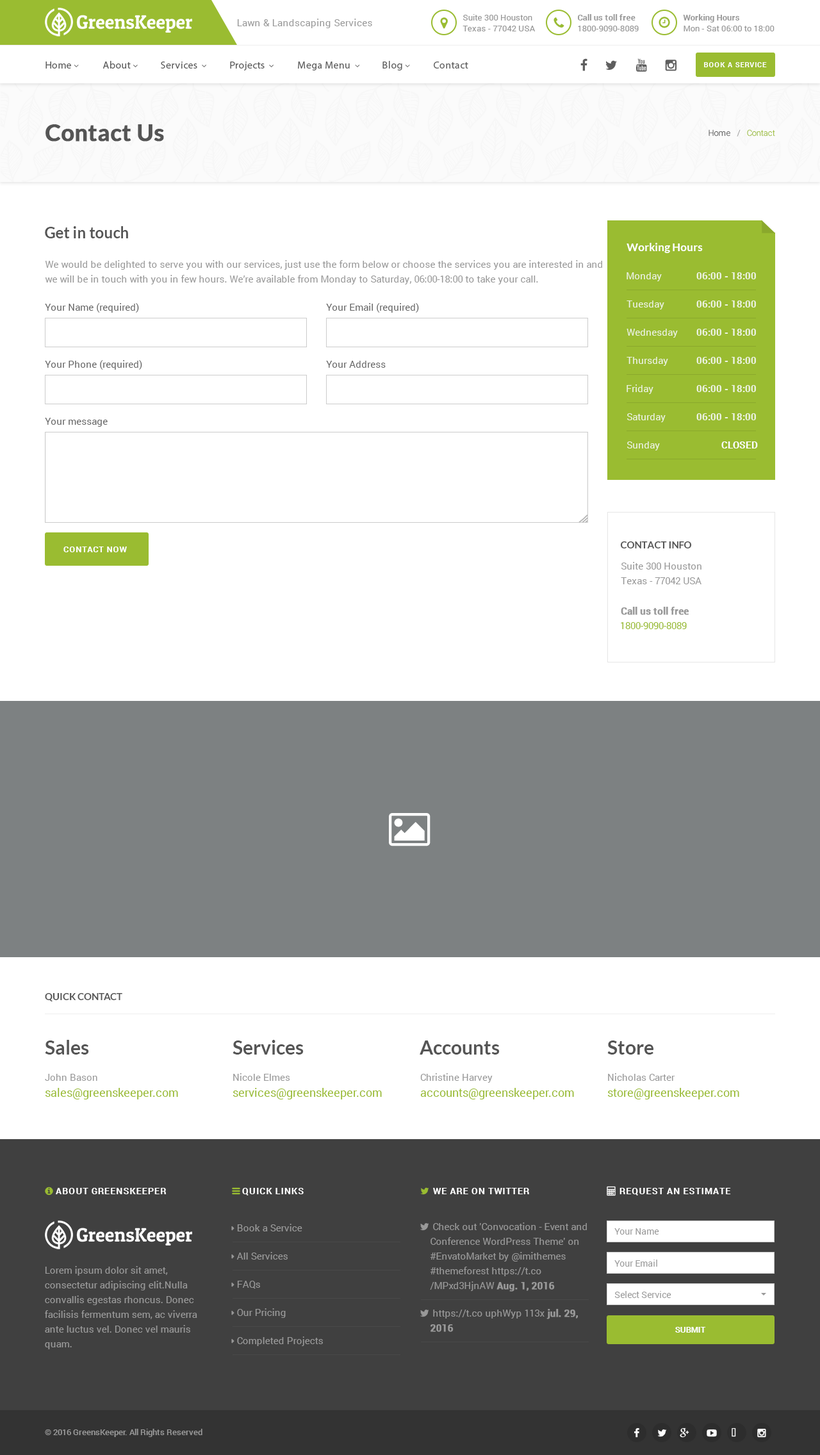
<style>
.page{position:relative;width:820px;height:1455px;background:#ffffff}
.page>*{position:absolute;margin:0}
.t1{font:8.3px/10.9px "Roboto-Regular";letter-spacing:0.02em;color:#999999}
.t2{font:8.3px/10.9px "Roboto-Bold";letter-spacing:0.02em;color:#999999}
.t3{font:9.6px "Roboto-Regular";letter-spacing:0.02em;color:#999999}
.t4{font:10.2px "MyriadPro-Regular";letter-spacing:0.02em;color:#5e5e5e}
.t5{font:7px "Roboto-Bold";letter-spacing:0.08em;color:#ffffff;text-transform:uppercase}
.t6{font:23.1px "Lato-Bold";color:#555555;font-weight:bold}
.t7{font:8.3px "Roboto-Light";color:#555555}
.t8{font:8.3px "Roboto-Light";color:#999999}
.t9{font:8.3px "Roboto-Light";color:#9abc31}
.t10{font:15.4px "Lato-Bold";color:#555555}
.t11{font:10.9px "Lato-Bold";color:#ffffff}
.t12{font:9.6px/14.7px "Roboto-Regular";color:#999999}
.t13{font:9.6px "Roboto-Regular";color:#edf3e0}
.t14{font:9.6px "Roboto-Bold";color:#edf3e0}
.t15{font:9.6px "Roboto-Regular";color:#666666}
.t16{font:9.6px "Roboto-Bold";color:#ffffff}
.t17{font:9.6px "Lato-Bold";color:#555555;text-transform:uppercase}
.t18{font:8.3px "Roboto-Bold";letter-spacing:0.08em;color:#ffffff;text-transform:uppercase}
.t19{font:9.6px "Roboto-Bold";color:#999999;font-weight:bold}
.t20{font:9.6px "Roboto-Regular";color:#9abc31}
.t21{font:19.2px "Lato-Bold";color:#555555}
.t22{font:9.6px "Roboto-Regular";color:#999999}
.t23{font:11.5px "Roboto-Regular";color:#9abc31}
.t24{font:9px "Roboto-Bold";letter-spacing:0.08em;color:#ffffff;text-transform:uppercase}
.t25{font:9.6px/14.7px "Roboto-Bold";color:#999999;font-weight:bold}
.t26{font:9px "Roboto-Regular";color:#999999}
.t27{font:8.3px "Roboto-Bold";color:#ffffff;text-transform:uppercase}
.t28{font:8.3px "Roboto-Medium";color:#999999}
</style>
<div class="page">
<p class="t1" style="left:462px;top:14px;width:73px;height:17px">Suite 300 Houston<br>Texas - 77042 USA</p>
<p class="t2" style="left:578px;top:14px;width:61px;height:17px">Call us toll free<br><span class="t1">1800-9090-8089</span></p>
<p class="t1" style="left:683px;top:14px;width:91px;height:17px"><span class="t2">Working Hours<br></span>Mon - Sat 06:00 to 18:00</p>
<p class="t3" style="left:237px;top:19px;width:135px;height:9px">Lawn &amp; Landscaping Services</p>
<p class="t4" style="left:434px;top:61px;width:34px;height:8px">Contact</p>
<p class="t5" style="left:704px;top:62px;width:63px;height:5px">Book a service</p>
<p class="t6" style="left:45px;top:124px;width:119px;height:18px">Contact Us</p>
<p class="t7" style="left:708px;top:129px;width:22px;height:7px">Home</p>
<p class="t8" style="left:737px;top:129px;width:3px;height:7px">/</p>
<p class="t9" style="left:747px;top:129px;width:28px;height:7px">Contact</p>
<p class="t10" style="left:45px;top:226px;width:83px;height:12px">Get in touch</p>
<p class="t11" style="left:626px;top:243px;width:77px;height:10px">Working Hours</p>
<p class="t12" style="left:45px;top:260px;width:557px;height:24px">We would be delighted to serve you with our services, just use the form below or choose the services you are interested in and <br>we will be in touch with you in few hours. We’re available from Monday to Saturday, 06:00-18:00 to take your call.</p>
<p class="t13" style="left:626px;top:272px;width:36px;height:9px">Monday</p>
<p class="t14" style="left:696px;top:272px;width:60px;height:7px">06:00 - 18:00</p>
<p class="t15" style="left:45px;top:303px;width:94px;height:10px">Your Name (required)</p>
<p class="t15" style="left:326px;top:303px;width:93px;height:10px">Your Email (required)</p>
<p class="t13" style="left:626px;top:300px;width:38px;height:9px">Tuesday</p>
<p class="t14" style="left:696px;top:300px;width:60px;height:7px">06:00 - 18:00</p>
<p class="t13" style="left:626px;top:329px;width:52px;height:9px">Wednesday</p>
<p class="t14" style="left:696px;top:329px;width:60px;height:7px">06:00 - 18:00</p>
<p class="t15" style="left:45px;top:360px;width:97px;height:10px">Your Phone (required)</p>
<p class="t15" style="left:326px;top:361px;width:60px;height:7px">Your Address</p>
<p class="t13" style="left:626px;top:357px;width:42px;height:9px">Thursday</p>
<p class="t14" style="left:696px;top:357px;width:60px;height:7px">06:00 - 18:00</p>
<p class="t13" style="left:626px;top:384px;width:27px;height:10px">Friday</p>
<p class="t14" style="left:696px;top:385px;width:60px;height:7px">06:00 - 18:00</p>
<p class="t13" style="left:627px;top:413px;width:38px;height:9px">Saturday</p>
<p class="t14" style="left:696px;top:413px;width:60px;height:7px">06:00 - 18:00</p>
<p class="t15" style="left:45px;top:418px;width:63px;height:9px">Your message</p>
<p class="t13" style="left:627px;top:441px;width:33px;height:9px">Sunday</p>
<p class="t16" style="left:721px;top:441px;width:37px;height:7px">CLOSED</p>
<p class="t17" style="left:620px;top:541px;width:72px;height:7px">Contact Info</p>
<p class="t18" style="left:63px;top:546px;width:64px;height:6px">Contact now</p>
<p class="t12" style="left:621px;top:562px;width:80px;height:22px">Suite 300 Houston<br>Texas - 77042 USA</p>
<p class="t19" style="left:621px;top:607px;width:68px;height:8px">Call us toll free</p>
<p class="t20" style="left:621px;top:622px;width:66px;height:7px">1800-9090-8089</p>
<p class="t17" style="left:45px;top:993px;width:77px;height:8px">Quick Contact</p>
<p class="t21" style="left:45px;top:1039px;width:44px;height:15px">Sales</p>
<p class="t21" style="left:232px;top:1039px;width:72px;height:15px">Services</p>
<p class="t21" style="left:420px;top:1040px;width:80px;height:14px">Accounts</p>
<p class="t21" style="left:607px;top:1040px;width:46px;height:14px">Store</p>
<p class="t22" style="left:45px;top:1073px;width:52px;height:7px">John Bason</p>
<p class="t22" style="left:233px;top:1073px;width:57px;height:7px">Nicole Elmes</p>
<p class="t22" style="left:420px;top:1073px;width:73px;height:9px">Christine Harvey</p>
<p class="t22" style="left:608px;top:1073px;width:66px;height:7px">Nicholas Carter</p>
<p class="t23" style="left:45px;top:1088px;width:133px;height:11px">sales@greenskeeper.com</p>
<p class="t23" style="left:232px;top:1088px;width:150px;height:11px">services@greenskeeper.com</p>
<p class="t23" style="left:420px;top:1088px;width:154px;height:11px">accounts@greenskeeper.com</p>
<p class="t23" style="left:607px;top:1088px;width:132px;height:11px">store@greenskeeper.com</p>
<p class="t24" style="left:56px;top:1187px;width:111px;height:7px">About GreensKeeper</p>
<p class="t24" style="left:242px;top:1187px;width:62px;height:8px">Quick Links</p>
<p class="t24" style="left:433px;top:1187px;width:96px;height:7px">We are on Twitter</p>
<p class="t24" style="left:619px;top:1187px;width:112px;height:8px">Request an Estimate</p>
<p class="t22" style="left:237px;top:1223px;width:65px;height:8px">Book a Service</p>
<p class="t12" style="left:430px;top:1222px;width:157px;height:69px">Check out 'Convocation - Event and <br>Conference WordPress Theme' on<br>#EnvatoMarket by @imithemes<br>#themeforest https://t.co<br>/MPxd3HjnAW <span class="t25">Aug. 1, 2016</span></p>
<p class="t26" style="left:614px;top:1228px;width:45px;height:6px">Your Name</p>
<p class="t22" style="left:236px;top:1251px;width:52px;height:8px">All Services</p>
<p class="t12" style="left:45px;top:1266px;width:152px;height:83px">Lorem ipsum dolor sit amet, <br>consectetur adipiscing elit.Nulla <br>convallis egestas rhoncus. Donec <br>facilisis fermentum sem, ac viverra <br>ante luctus vel. Donec vel mauris <br>quam.</p>
<p class="t26" style="left:614px;top:1259px;width:43px;height:7px">Your Email</p>
<p class="t22" style="left:237px;top:1280px;width:23px;height:9px">FAQs</p>
<p class="t26" style="left:614px;top:1291px;width:57px;height:7px">Select Service</p>
<p class="t22" style="left:237px;top:1308px;width:49px;height:9px">Our Pricing</p>
<p class="t12" style="left:430px;top:1308px;width:148px;height:24px">https://t.co uphWyp 113x<span class="t25"> jul. 29,<br>2016</span></p>
<p class="t22" style="left:237px;top:1336px;width:86px;height:10px">Completed Projects</p>
<p class="t27" style="left:675px;top:1326px;width:31px;height:6px">Submit</p>
<p class="t28" style="left:45px;top:1428px;width:157px;height:9px">© 2016 GreensKeeper. All Rights Reserved</p>
</div>
